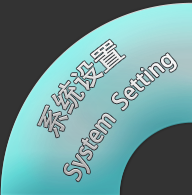
<style>
.page{position:relative;width:192px;height:195px;background:#333333}
.page>*{position:absolute;margin:0}
.t1{font:28.9px "AdobeHeitiStd-Regular";scale:0.91 1}
.t2{font:23.6px "AdobeHeitiStd-Regular";scale:0.91 1}
</style>
<div class="page">
<p class="t1" style="left:37px;top:39px;width:89px;height:99px;rotate:-50deg">系统设置</p>
<p class="t2" style="left:64px;top:53px;width:113px;height:129px;rotate:-51deg">System  Setting</p>
</div>
